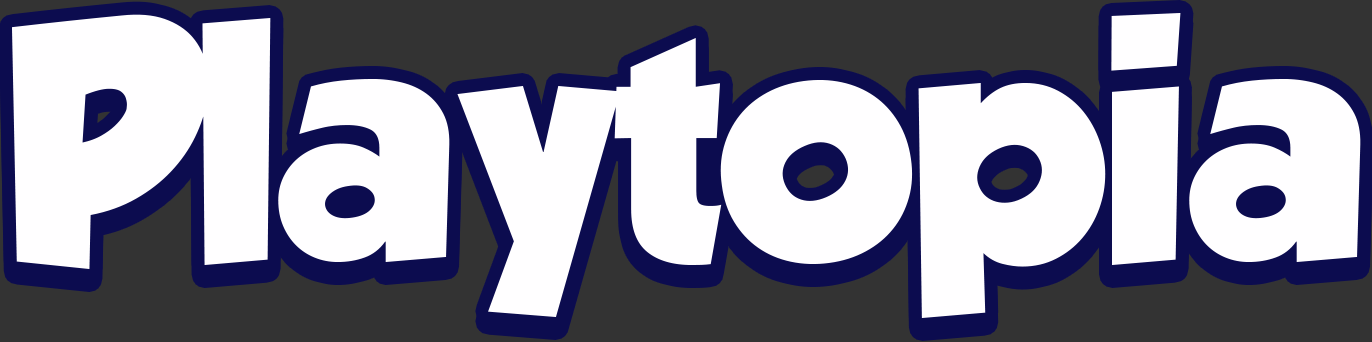
<style>
.page{position:relative;width:1372px;height:342px;background:#fffeff}
.page>*{position:absolute;margin:0}
.t1{font:299.8px "GROBOLD";color:#fffeff}
</style>
<div class="page">
<p class="t1" style="left:12px;top:23px;width:1349px;height:305px">Playtopia</p>
</div>
